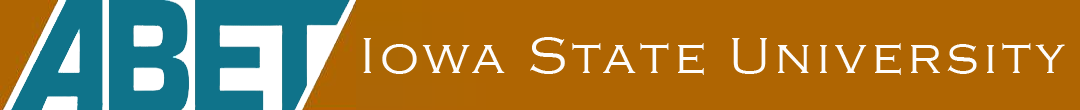
<style>
.page{position:relative;width:1080px;height:110px;background:#af6502}
.page>*{position:absolute;margin:0}
.t1{font:52px "CopperplateGothic-Light";letter-spacing:0.1em;color:#fdfcfb}
</style>
<div class="page">
<p class="t1" style="left:363px;top:37px;width:702px;height:38px">Iowa State University</p>
</div>
